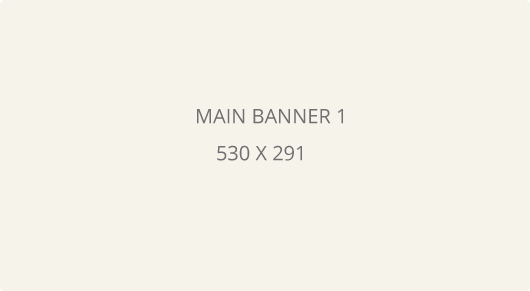
<style>
.page{position:relative;width:530px;height:291px;background:#f6f3eb}
.page>*{position:absolute;margin:0}
.t1{font:20px "OpenSans";color:#707070}
</style>
<div class="page">
<p class="t1" style="left:197px;top:109px;width:146px;height:15px">MAIN BANNER 1</p>
<p class="t1" style="left:217px;top:145px;width:85px;height:16px">530 X 291</p>
</div>
